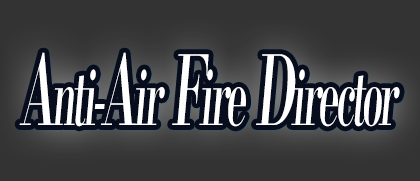
<style>
.page{position:relative;width:420px;height:181px;background:#333333}
.page>*{position:absolute;margin:0}
.t1{font:76.8px "KochoStd-Heavy";letter-spacing:-0.08em;color:#ffffff;font-style:italic;scale:0.5 1}
.t2{font:96px "KochoStd-Heavy";letter-spacing:-0.08em;color:#ffffff;font-style:italic;scale:0.5 1}
</style>
<div class="page">
<p class="t1" style="left:19px;top:52px;width:381px;height:75px"><span class="t2">A</span>nti-<span class="t2">A</span>ir<span class="t2"> F</span>ire<span class="t2"> D</span>irector</p>
</div>
